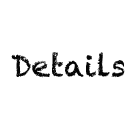
<style>
.page{position:relative;width:140px;height:140px;background:#ffffff}
.page>*{position:absolute;margin:0}
.t1{font:30px "Chalkduster";color:#050505}
</style>
<div class="page">
<p class="t1" style="left:11px;top:52px;width:114px;height:26px">Details</p>
</div>
